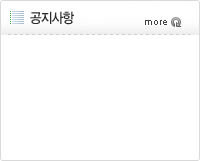
<style>
.page{position:relative;width:200px;height:161px;background:#ffffff}
.page>*{position:absolute;margin:0}
.t1{font:13.8px "YDIYGO330";letter-spacing:-0.05em;color:#2b2b2b;scale:0.91 1}
.t2{font:10px "ArialMT";color:#424242}
</style>
<div class="page">
<p class="t1" style="left:30px;top:11px;width:44px;height:14px">공지사항</p>
<p class="t2" style="left:145px;top:20px;width:22px;height:5px">more</p>
</div>
